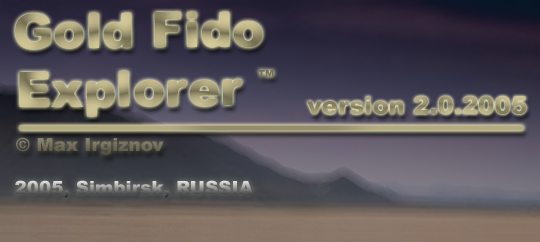
<style>
.page{position:relative;width:540px;height:242px}
.page>*{position:absolute;margin:0}
.t1{font:48.8px "Arial-Black"}
.t2{font:24px "Arial-Black";font-variant:small-caps}
.t3{font:24.4px "Arial-Black"}
.t4{font:18.3px "Arial-Black";color:#736f5b}
.t5{font:18.3px "Arial-Black"}
</style>
<div class="page">
<p class="t1" style="left:15px;top:11px;width:259px;height:106px;rotate:-1deg">Gold Fido<br>Explorer <span class="t2">tm</span></p>
<p class="t3" style="left:307px;top:96px;width:220px;height:19px">version 2.0.2005</p>
<p class="t4" style="left:16px;top:137px;width:148px;height:18px">© Max Irgiznov</p>
<p class="t5" style="left:15px;top:180px;width:238px;height:18px">2005, Simbirsk, RUSSIA</p>
</div>
